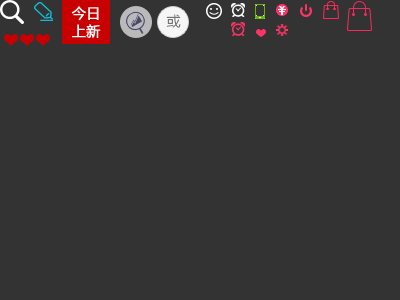
<style>
.page{position:relative;width:400px;height:300px;background:#333333}
.page>*{position:absolute;margin:0}
.t1{font:14px/18px "MicrosoftYaHei";color:#ffffff;font-weight:bold}
</style>
<div class="page">
<p class="t1" style="left:71px;top:6px;width:30px;height:32px;text-align:center">今日<br>上新</p>
</div>
